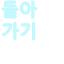
<style>
.page{position:relative;width:64px;height:64px;background:#ffffff}
.page>*{position:absolute;margin:0}
.t1{font:18px "MalgunGothicRegular";color:#c7f9fe}
</style>
<div class="page">
<p class="t1" style="left:2px;top:1px;width:35px;height:39px;text-align:center">돌아<br>가기</p>
</div>
